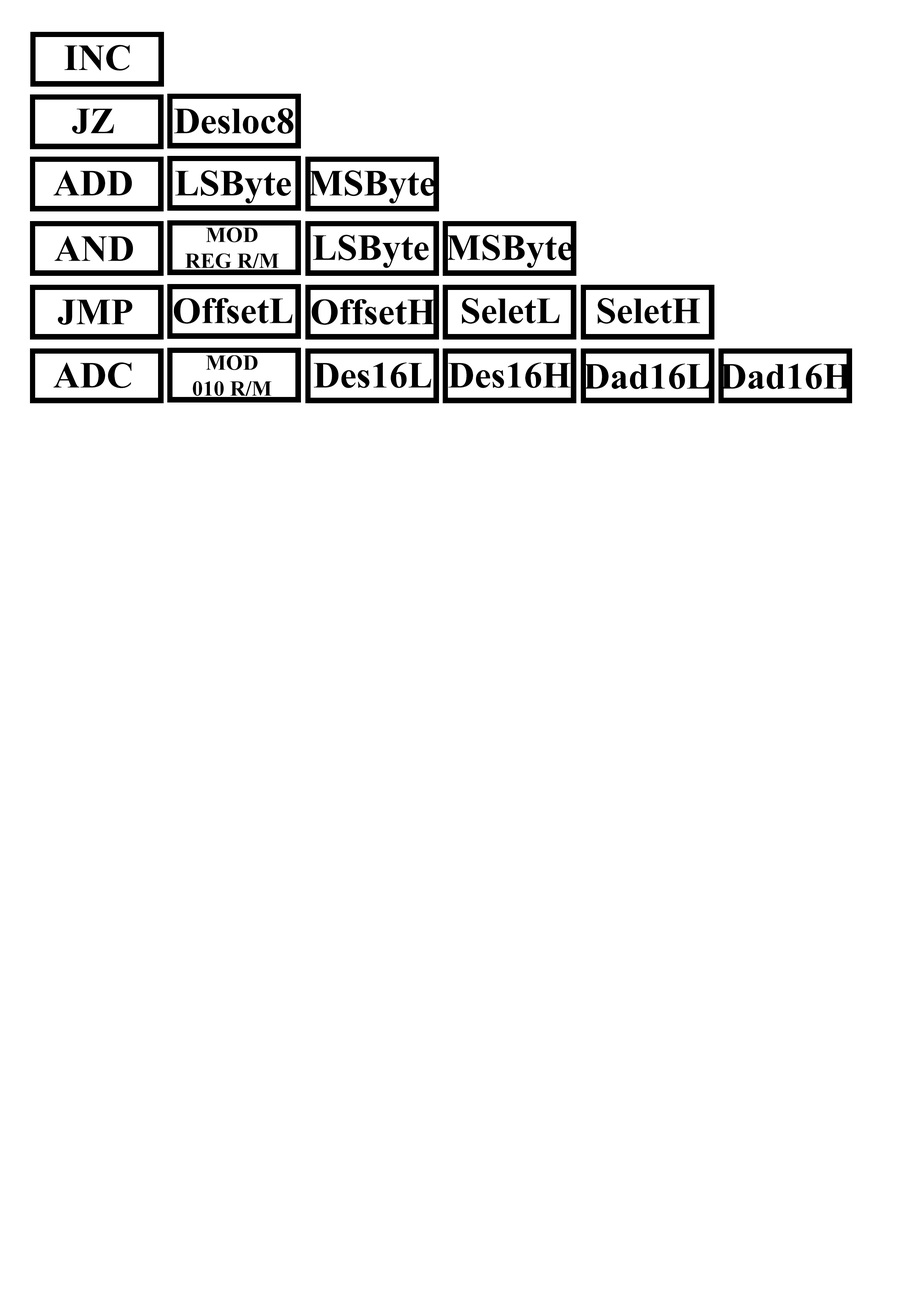
<style>
.page{position:relative;width:918px;height:1299px;background:#ffffff}
.page>*{position:absolute;margin:0}
.t1{font:37px "TimesNewRomanPS-BoldMT";color:#000000}
.t2{font:21.6px "TimesNewRomanPS-BoldMT";color:#000000}
</style>
<div class="page">
<p class="t1" style="left:64px;top:45px;width:66px;height:26px">INC</p>
<p class="t1" style="left:72px;top:108px;width:42px;height:26px">JZ</p>
<p class="t1" style="left:174px;top:108px;width:120px;height:26px">Desloc8</p>
<p class="t1" style="left:53px;top:170px;width:79px;height:25px">ADD</p>
<p class="t1" style="left:175px;top:170px;width:116px;height:34px">LSByte</p>
<p class="t1" style="left:309px;top:170px;width:126px;height:34px">MSByte</p>
<p class="t2" style="left:185px;top:227px;width:94px;height:41px;text-align:center">MOD<br>REG R/M</p>
<p class="t1" style="left:54px;top:235px;width:79px;height:26px">AND</p>
<p class="t1" style="left:313px;top:235px;width:116px;height:33px">LSByte</p>
<p class="t1" style="left:446px;top:235px;width:127px;height:33px">MSByte</p>
<p class="t1" style="left:58px;top:300px;width:75px;height:25px">JMP</p>
<p class="t1" style="left:174px;top:298px;width:118px;height:26px">OffsetL</p>
<p class="t1" style="left:312px;top:299px;width:123px;height:26px">OffsetH</p>
<p class="t1" style="left:462px;top:298px;width:98px;height:26px">SeletL</p>
<p class="t1" style="left:598px;top:298px;width:102px;height:26px">SeletH</p>
<p class="t1" style="left:53px;top:362px;width:78px;height:26px">ADC</p>
<p class="t2" style="left:193px;top:355px;width:79px;height:41px;text-align:center">MOD<br>010 R/M</p>
<p class="t1" style="left:314px;top:362px;width:117px;height:26px">Des16L</p>
<p class="t1" style="left:448px;top:362px;width:123px;height:26px">Des16H</p>
<p class="t1" style="left:584px;top:364px;width:126px;height:25px">Dad16L</p>
<p class="t1" style="left:720px;top:364px;width:131px;height:25px">Dad16H</p>
</div>
